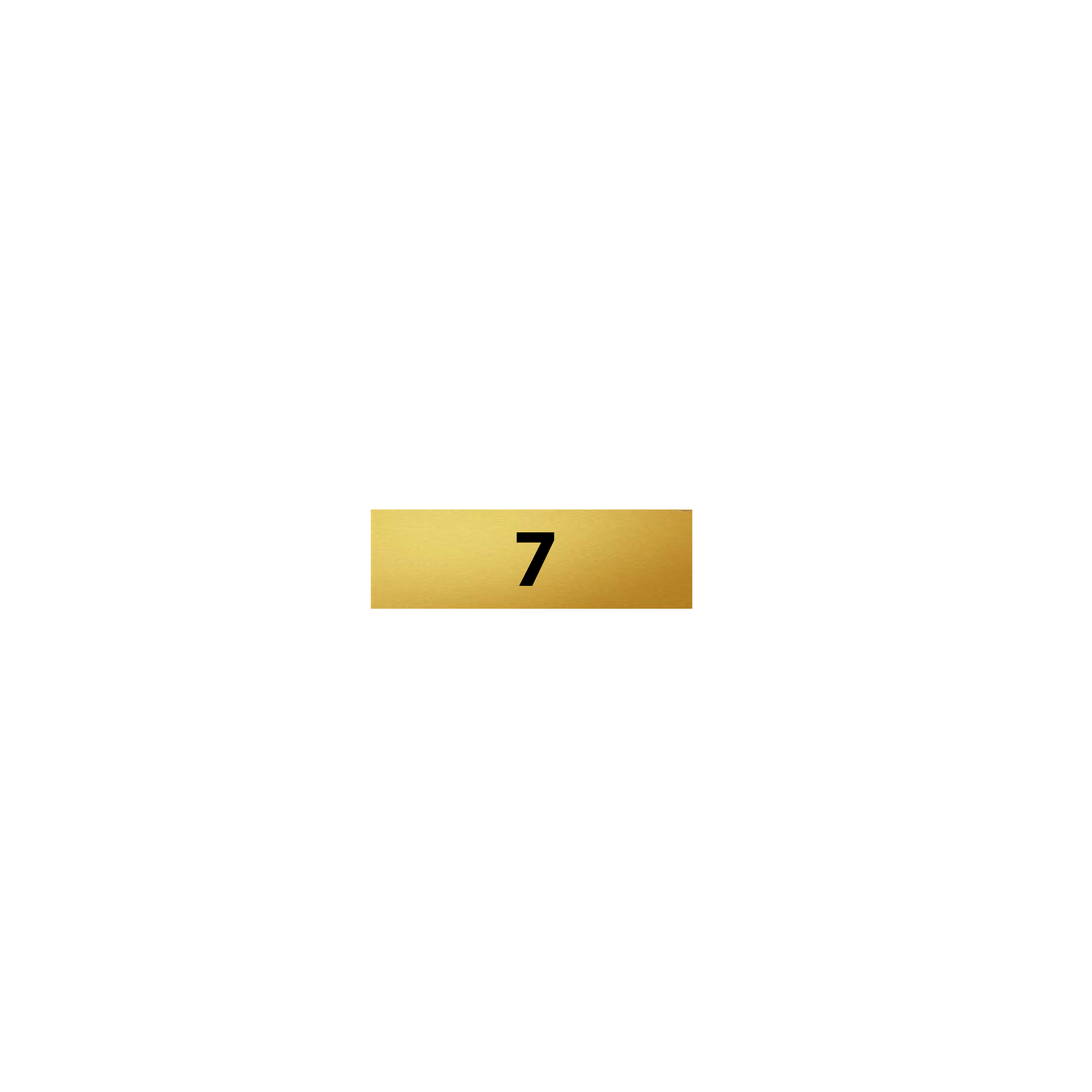
<style>
.page{position:relative;width:1092px;height:1092px;background:#ffffff}
.page>*{position:absolute;margin:0}
.t1{font:81.9px "MyriadPro-Bold";color:#000000}
</style>
<div class="page">
<p class="t1" style="left:517px;top:532px;width:37px;height:54px">7</p>
</div>
